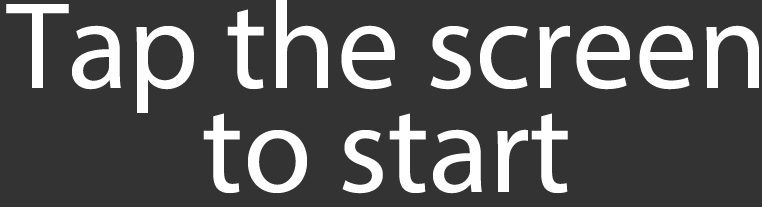
<style>
.page{position:relative;width:762px;height:207px;background:#333333}
.page>*{position:absolute;margin:0}
.t1{font:125px/104.2px "MyriadPro-Regular";color:#ffffff}
</style>
<div class="page">
<p class="t1" style="left:6px;top:0px;width:753px;height:194px;text-align:center">Tap the screen<br>to start</p>
</div>
